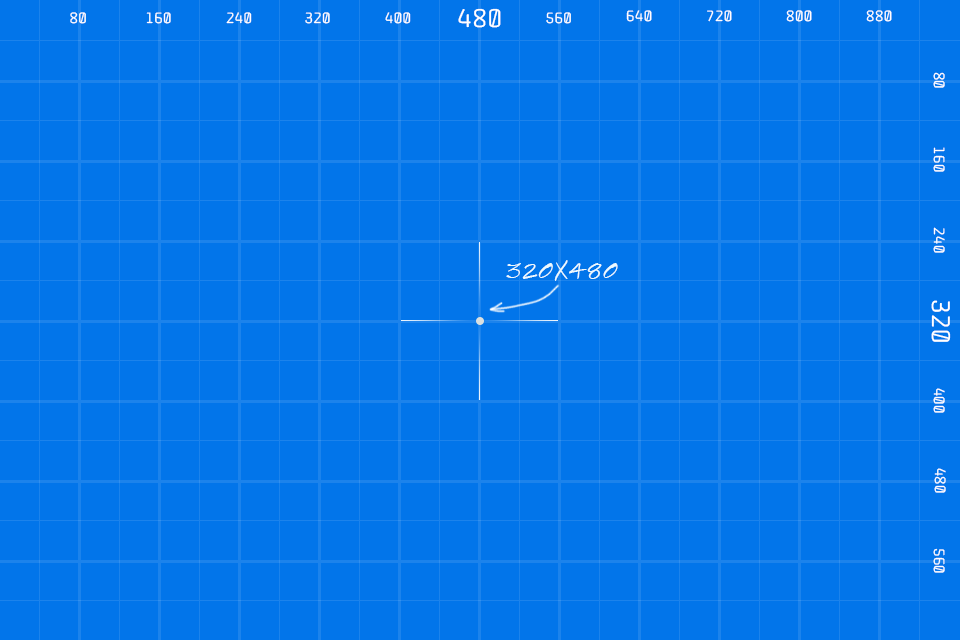
<style>
.page{position:relative;width:960px;height:640px;background:#0275ea}
.page>*{position:absolute;margin:0}
.t1{font:14px "Offside-Regular";letter-spacing:0.03em;color:#ffffff;text-transform:uppercase}
.t2{font:24px "Offside-Regular";letter-spacing:0.03em;color:#ffffff;text-transform:uppercase}
.t3{font:23.8px "SketchFlowPrint";letter-spacing:0.03em;color:#edfafe;text-transform:uppercase}
</style>
<div class="page">
<p class="t1" style="left:70px;top:12px;width:16px;height:12px">80</p>
<p class="t1" style="left:146px;top:12px;width:25px;height:12px">160</p>
<p class="t1" style="left:226px;top:12px;width:26px;height:12px">240</p>
<p class="t1" style="left:305px;top:12px;width:25px;height:12px">320</p>
<p class="t1" style="left:385px;top:12px;width:26px;height:12px">400</p>
<p class="t2" style="left:458px;top:8px;width:43px;height:20px">480</p>
<p class="t1" style="left:546px;top:12px;width:25px;height:12px">560</p>
<p class="t1" style="left:626px;top:10px;width:26px;height:12px">640</p>
<p class="t1" style="left:707px;top:10px;width:25px;height:12px">720</p>
<p class="t1" style="left:786px;top:10px;width:26px;height:12px">800</p>
<p class="t1" style="left:866px;top:10px;width:26px;height:12px">880</p>
<p class="t1" style="left:933px;top:72px;width:12px;height:16px;rotate:90deg">80</p>
<p class="t1" style="left:933px;top:147px;width:12px;height:25px;rotate:90deg">160</p>
<p class="t1" style="left:933px;top:227px;width:12px;height:26px;rotate:90deg">240</p>
<p class="t3" style="left:506px;top:260px;width:112px;height:21px">320x480</p>
<p class="t2" style="left:931px;top:300px;width:20px;height:42px;rotate:90deg">320</p>
<p class="t1" style="left:933px;top:388px;width:12px;height:25px;rotate:90deg">400</p>
<p class="t1" style="left:934px;top:468px;width:12px;height:25px;rotate:90deg">480</p>
<p class="t1" style="left:933px;top:548px;width:12px;height:25px;rotate:90deg">560</p>
</div>
